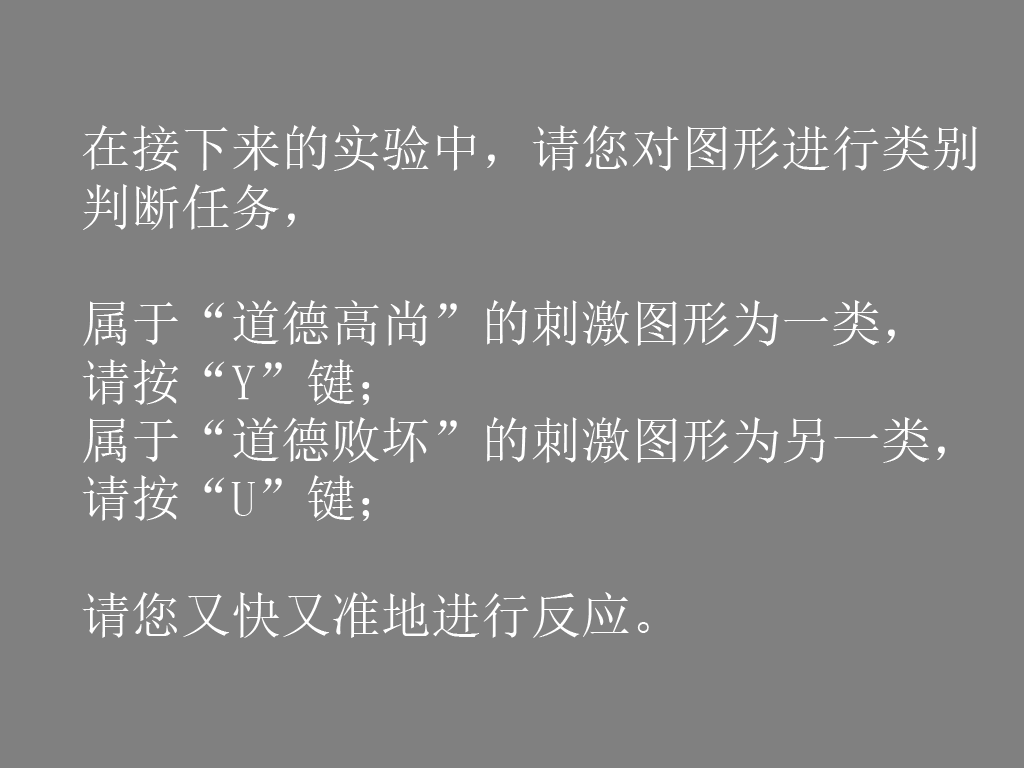
<style>
.page{position:relative;width:1024px;height:768px;background:#808080}
.page>*{position:absolute;margin:0}
.t1{font:50px/58.3px "SimSun";color:#ffffff}
</style>
<div class="page">
<p class="t1" style="left:82px;top:125px;width:895px;height:513px">在接下来的实验中，请您对图形进行类别<br>判断任务，<br><br>属于“道德高尚”的刺激图形为一类，<br>请按“Y”键；<br>属于“道德败坏”的刺激图形为另一类，<br>请按“U”键；<br><br>请您又快又准地进行反应。</p>
</div>
